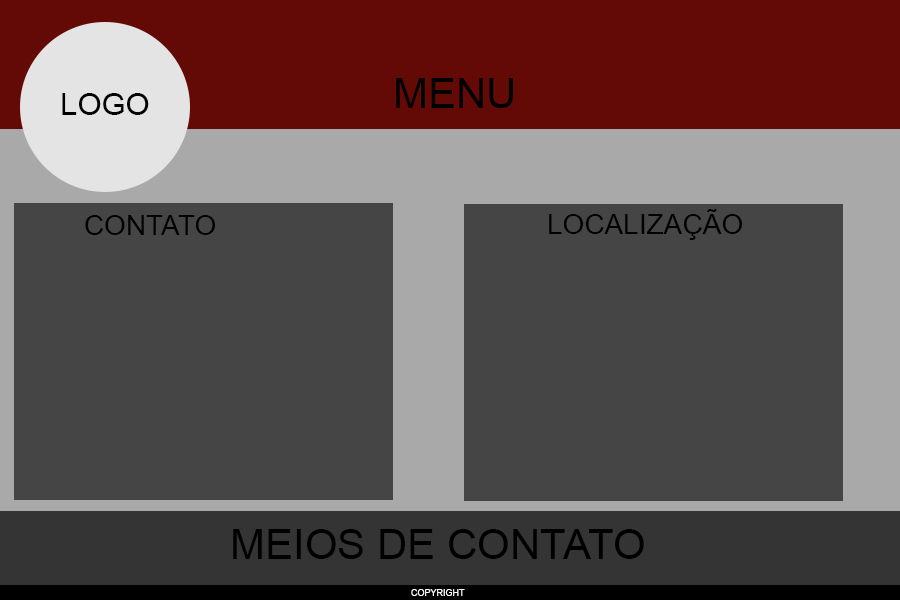
<style>
.page{position:relative;width:900px;height:600px;background:#454545}
.page>*{position:absolute;margin:0}
.t1{font:42px "ArialMT";color:#000000}
.t2{font:31px "ArialMT";color:#000000}
.t3{font:28px "ArialMT";color:#000000}
.t4{font:9px "ArialMT";color:#ffffff}
</style>
<div class="page">
<p class="t1" style="left:396px;top:78px;width:117px;height:30px">MENU</p>
<p class="t2" style="left:62px;top:93px;width:87px;height:22px">LOGO</p>
<p class="t3" style="left:549px;top:209px;width:193px;height:31px">LOCALIZAÇÃO</p>
<p class="t3" style="left:85px;top:215px;width:130px;height:20px">CONTATO</p>
<p class="t1" style="left:233px;top:529px;width:411px;height:30px">MEIOS DE CONTATO</p>
<p class="t4" style="left:411px;top:589px;width:54px;height:7px">COPYRIGHT</p>
</div>
